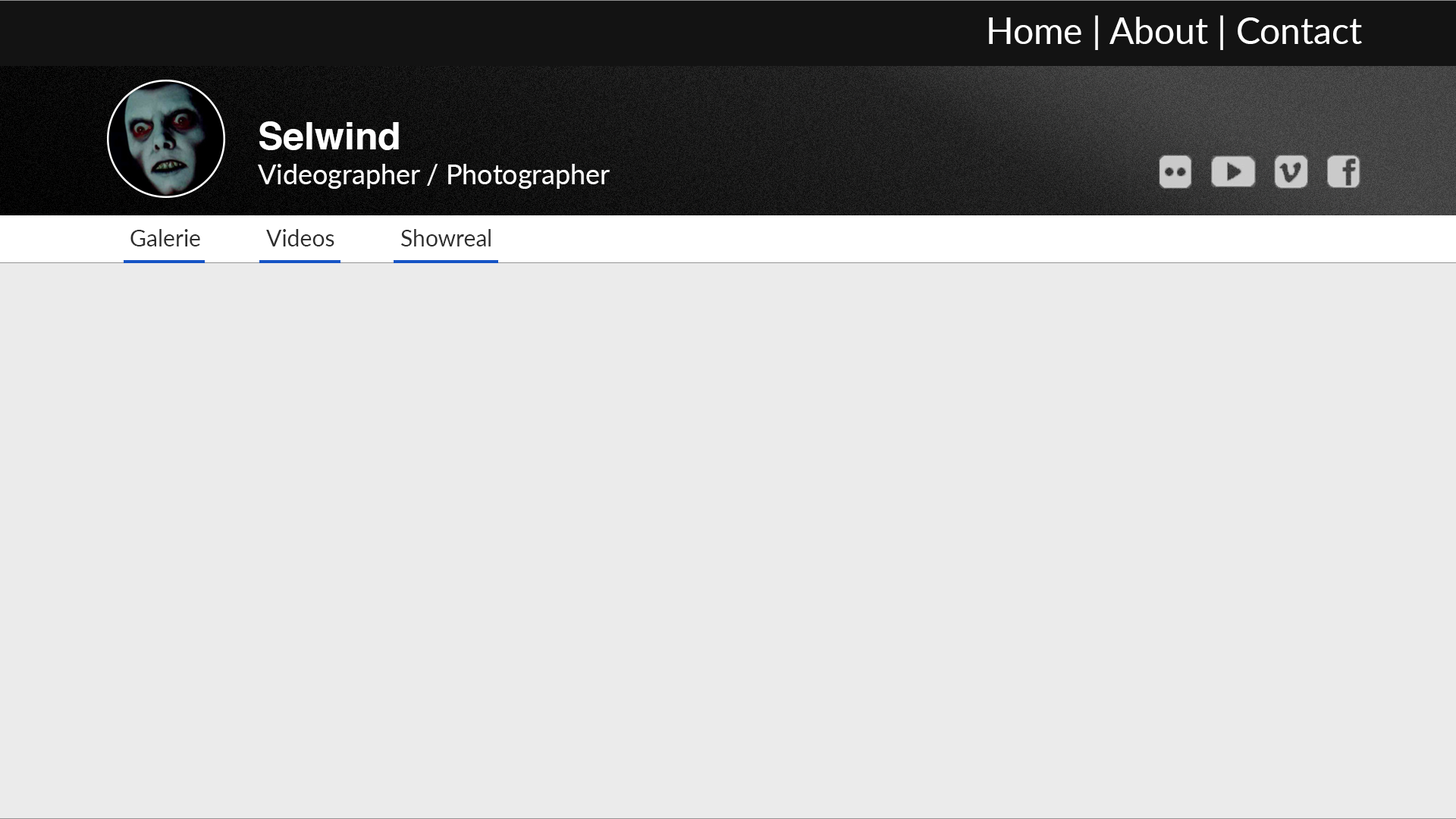
<style>
.page{position:relative;width:1456px;height:819px;background:#ebebeb}
.page>*{position:absolute;margin:0}
.t1{font:36.4px "Lato-Regular";color:#fefefe}
.t2{font:37.9px "Helvetica-Bold";color:#fefefe}
.t3{font:27.3px "Lato-Regular";color:#fefefe}
.t4{font:22.7px "Lato-Regular";color:#2e2e2e}
</style>
<div class="page">
<p class="t1" style="left:989px;top:15px;width:373px;height:35px">Home | About | Contact</p>
<p class="t2" style="left:259px;top:121px;width:140px;height:29px">Selwind</p>
<p class="t3" style="left:258px;top:164px;width:352px;height:25px">Videographer / Photographer</p>
<p class="t4" style="left:130px;top:229px;width:70px;height:17px">Galerie</p>
<p class="t4" style="left:266px;top:229px;width:68px;height:17px">Videos</p>
<p class="t4" style="left:401px;top:229px;width:90px;height:17px">Showreal</p>
</div>
